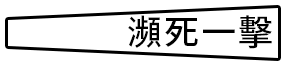
<style>
.page{position:relative;width:286px;height:66px;background:#ffffff}
.page>*{position:absolute;margin:0}
.t1{font:35px "NotoSansCJKtc-Medium";letter-spacing:0.06em;color:#000000}
</style>
<div class="page">
<p class="t1" style="left:128px;top:15px;width:144px;height:34px">瀕死一擊</p>
</div>
